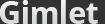
<style>
.page{position:relative;width:105px;height:24px;background:#333333}
.page>*{position:absolute;margin:0}
.t1{font:31.5px "DroidSans-Bold";letter-spacing:-0.015em;color:#e1e2e2}
</style>
<div class="page">
<p class="t1" style="left:0px;top:0px;width:98px;height:24px">Gimlet</p>
</div>
